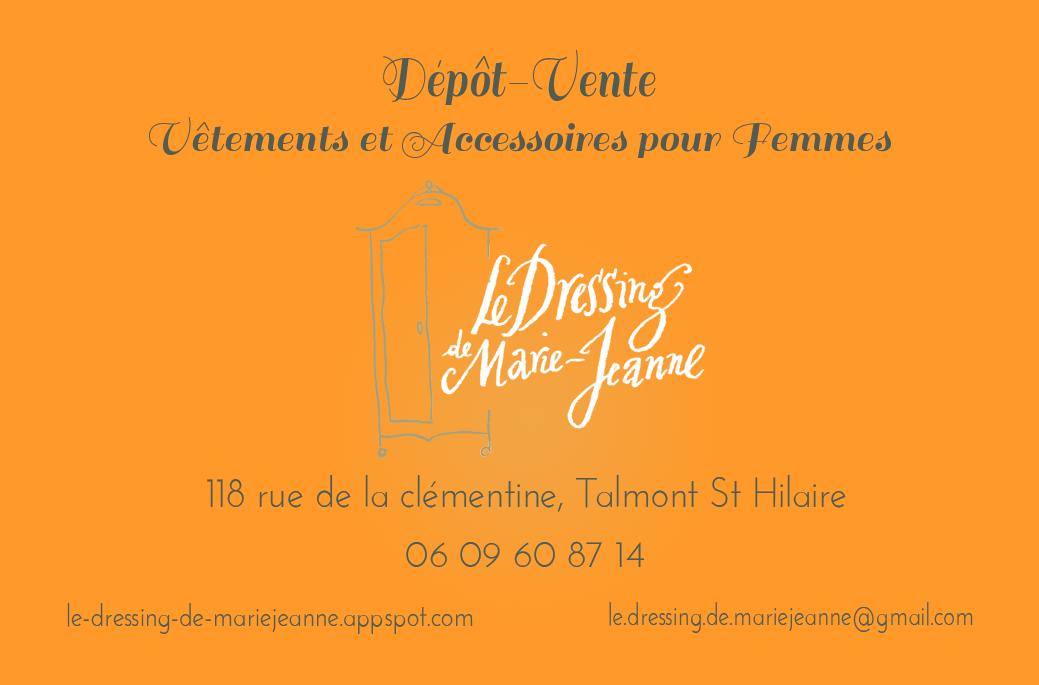
<style>
.page{position:relative;width:1039px;height:685px;background:#ff9929}
.page>*{position:absolute;margin:0}
.t1{font:62.5px "Sail-Regular";color:#535d53;scale:0.78 1}
.t2{font:45.8px "Sail-Regular";color:#535d53}
.t3{font:41.7px "JosefinSans";color:#535d53;scale:0.9 1}
.t4{font:37.5px "JosefinSans";color:#535d53}
.t5{font:31.3px "JosefinSans";color:#535d53;scale:0.84 1}
.t6{font:31.3px "JosefinSans";color:#535d53;scale:0.78 1}
</style>
<div class="page">
<p class="t1" style="left:383px;top:50px;width:273px;height:55px">Dépôt-Vente</p>
<p class="t2" style="left:149px;top:117px;width:742px;height:41px">Vêtements et Accessoires pour Femmes</p>
<p class="t3" style="left:207px;top:475px;width:639px;height:37px">118 rue de la clémentine, Talmont St Hilaire</p>
<p class="t4" style="left:406px;top:541px;width:239px;height:27px">06 09 60 87 14</p>
<p class="t5" style="left:67px;top:603px;width:406px;height:31px">le-dressing-de-mariejeanne.appspot.com</p>
<p class="t6" style="left:609px;top:602px;width:364px;height:31px">le.dressing.de.mariejeanne@gmail.com</p>
</div>
